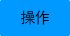
<style>
.page{position:relative;width:70px;height:36px;background:#0099ff}
.page>*{position:absolute;margin:0}
.t1{font:15px "STXihei";letter-spacing:-0.045em;color:#000000}
</style>
<div class="page">
<p class="t1" style="left:21px;top:10px;width:29px;height:15px">操作</p>
</div>
